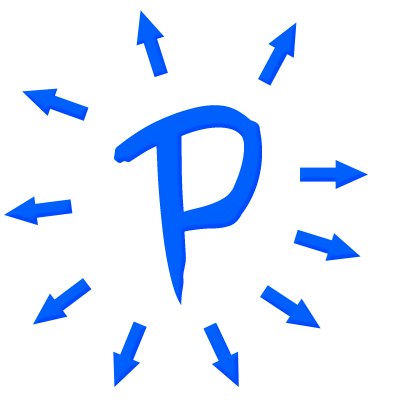
<style>
.page{position:relative;width:400px;height:400px;background:#ffffff}
.page>*{position:absolute;margin:0}
.t1{font:355.4px "NanumBrush";color:#0060fe}
</style>
<div class="page">
<p class="t1" style="left:114px;top:105px;width:148px;height:200px">P</p>
</div>
